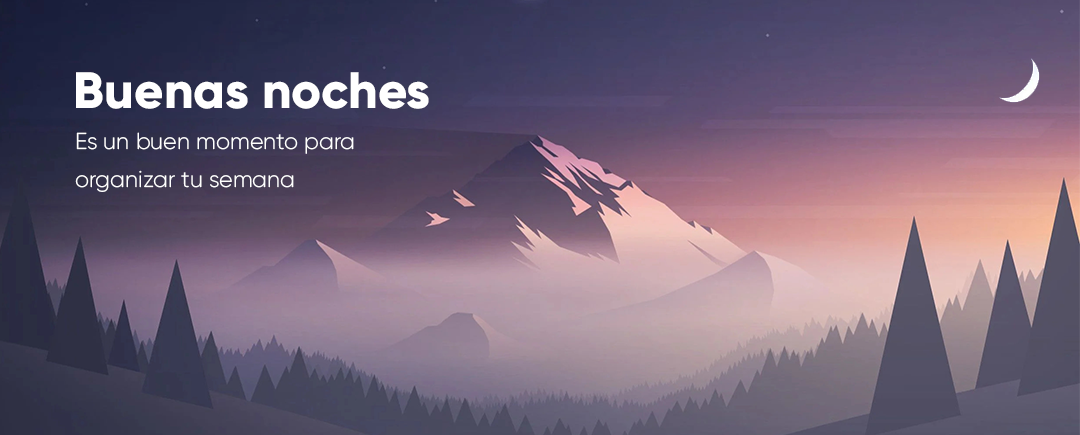
<style>
.page{position:relative;width:1080px;height:435px}
.page>*{position:absolute;margin:0}
.t1{font:51px "Gilroy-ExtraBold";color:#ffffff}
.t2{font:23px "Gilroy-Light";color:#ffffff}
</style>
<div class="page">
<p class="t1" style="left:76px;top:72px;width:353px;height:37px">Buenas noches</p>
<p class="t2" style="left:75px;top:132px;width:279px;height:60px">Es un buen momento para<br>organizar tu semana</p>
</div>
